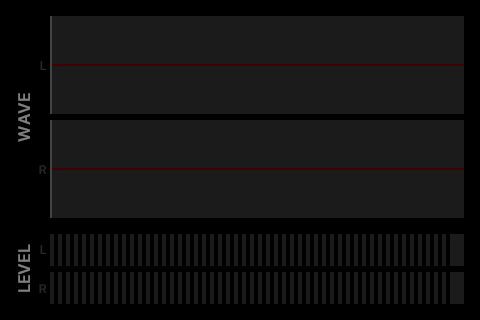
<style>
.page{position:relative;width:480px;height:320px;background:#1b1b1b}
.page>*{position:absolute;margin:0}
.t1{font:12px "Sarasa-UI-J-Semibold";color:#262626}
.t2{font:16px "Sarasa-UI-J-Semibold";color:#808080}
</style>
<div class="page">
<p class="t1" style="left:40px;top:61px;width:6px;height:9px">L</p>
<p class="t2" style="left:18px;top:93px;width:12px;height:49px;rotate:-90deg">WAVE</p>
<p class="t1" style="left:39px;top:165px;width:8px;height:9px">R</p>
<p class="t2" style="left:18px;top:244px;width:12px;height:48px;rotate:-90deg">LEVEL</p>
<p class="t1" style="left:40px;top:245px;width:6px;height:9px">L</p>
<p class="t1" style="left:39px;top:284px;width:8px;height:9px">R</p>
</div>
